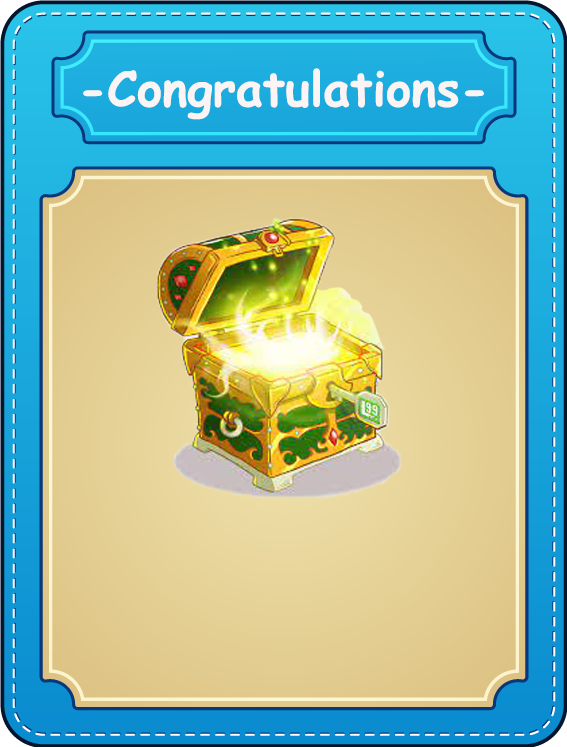
<style>
.page{position:relative;width:567px;height:747px}
.page>*{position:absolute;margin:0}
.t1{font:48px "ComicSansMS-Bold";color:#fbf4f4}
</style>
<div class="page">
<p class="t1" style="left:83px;top:68px;width:401px;height:52px">-Congratulations-</p>
</div>
